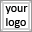
<style>
.page{position:relative;width:32px;height:32px;background:#ffffff}
.page>*{position:absolute;margin:0}
.t1{font:12px "Calibri";color:#000000}
</style>
<div class="page">
<p class="t1" style="left:5px;top:6px;width:23px;height:22px">your<br>logo</p>
</div>
